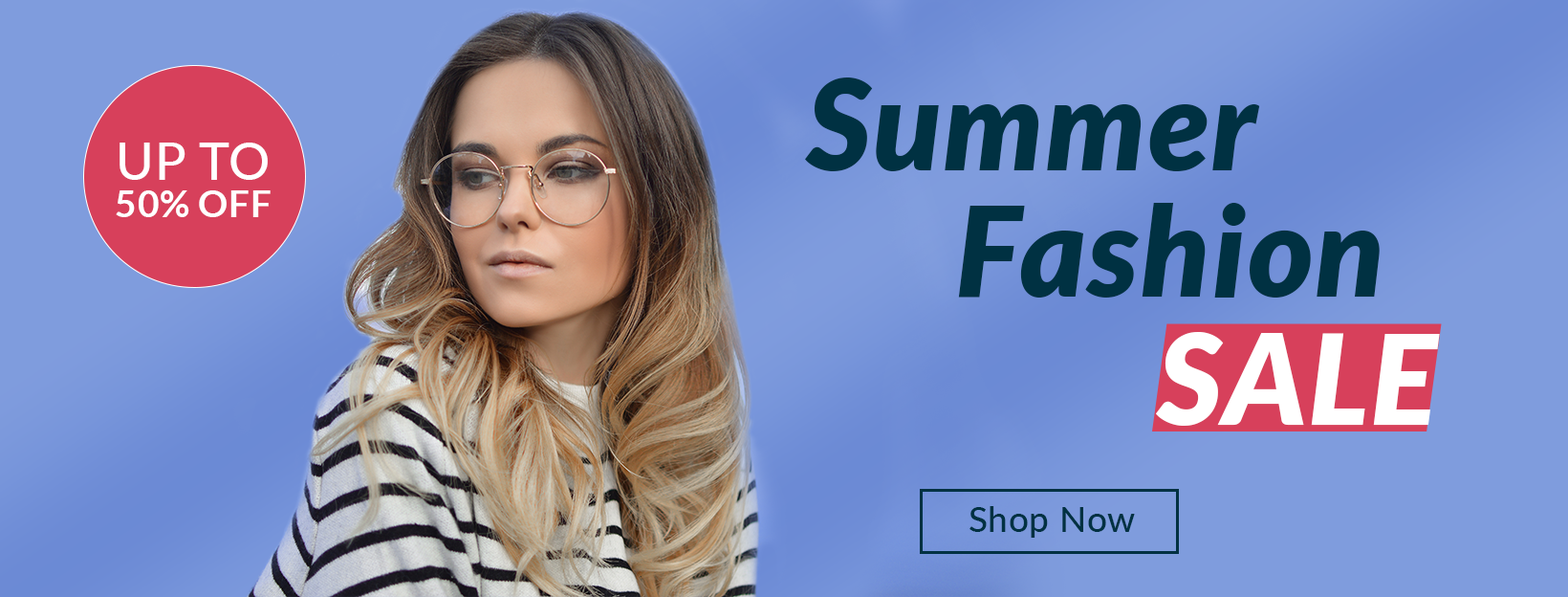
<style>
.page{position:relative;width:1568px;height:597px}
.page>*{position:absolute;margin:0}
.t1{font:125.2px "Lato-BlackItalic";letter-spacing:0.02em;color:#003142}
.t2{font:37.3px/37.3px "Lato-Bold";letter-spacing:0.02em;color:#ffffff;text-transform:uppercase}
.t3{font:51.6px/37.3px "Lato-Medium";letter-spacing:0.02em;color:#ffffff;text-transform:uppercase}
.t4{font:125.2px "Lato-BlackItalic";letter-spacing:0.02em;color:#ffffff}
.t5{font:35.4px "Lato-Medium";letter-spacing:0.02em;color:#003142}
</style>
<div class="page">
<p class="t1" style="left:805px;top:77px;width:455px;height:94px">Summer</p>
<p class="t2" style="left:116px;top:142px;width:155px;height:75px;text-align:center"><span class="t3">Up To<br></span>50% Off</p>
<p class="t1" style="left:958px;top:203px;width:422px;height:94px">Fashion</p>
<p class="t4" style="left:1156px;top:332px;width:284px;height:93px">SALE</p>
<p class="t5" style="left:969px;top:506px;width:166px;height:31px">Shop Now</p>
</div>
